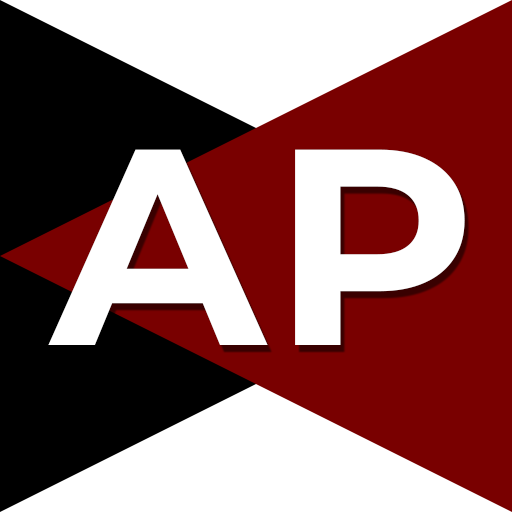
<style>
.page{position:relative;width:512px;height:512px;background:#ffffff}
.page>*{position:absolute;margin:0}
.t1{font:279px "Montserrat-Bold";letter-spacing:0.025em;color:#ffffff}
</style>
<div class="page">
<p class="t1" style="left:48px;top:149px;width:417px;height:196px">AP</p>
</div>
